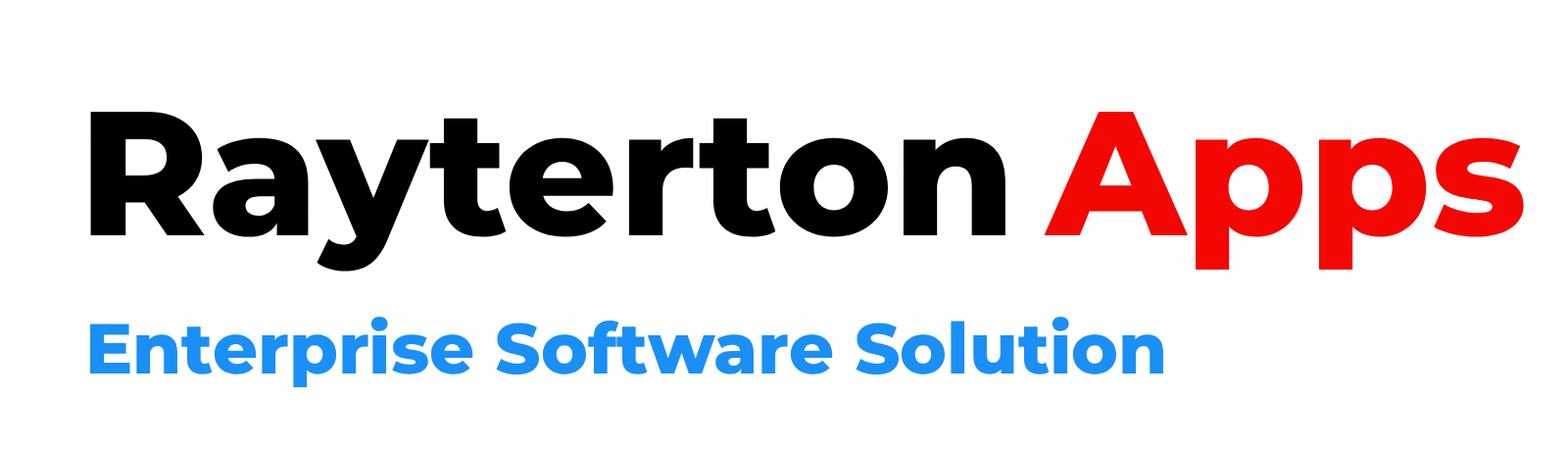
<style>
.page{position:relative;width:1568px;height:449px;background:#ffffff}
.page>*{position:absolute;margin:0}
.t1{font:176.4px "Montserrat-ExtraBold";color:#000000}
.t2{font:176.4px "Montserrat-ExtraBold";color:#f20703}
.t3{font:70.6px "Montserrat-ExtraBold";color:#1a8ff5}
</style>
<div class="page">
<p class="t1" style="left:90px;top:112px;width:915px;height:159px">Rayterton</p>
<p class="t2" style="left:1044px;top:112px;width:480px;height:158px">Apps</p>
<p class="t3" style="left:90px;top:317px;width:1073px;height:70px">Enterprise Software Solution</p>
</div>
